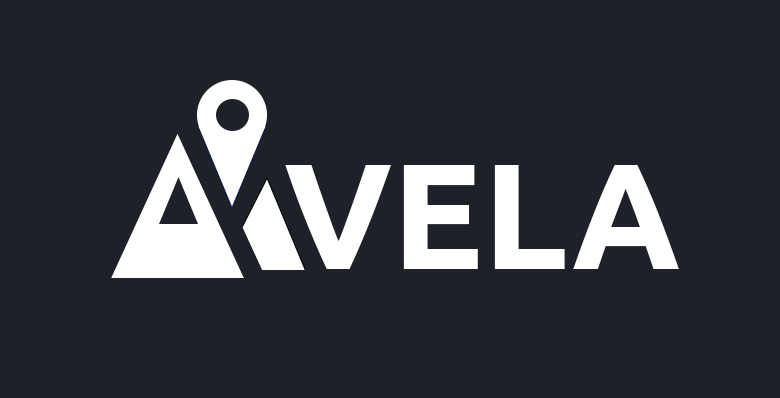
<style>
.page{position:relative;width:780px;height:398px;background:#1e2128}
.page>*{position:absolute;margin:0}
.t1{font:150px "Ubuntu-Bold";color:#ffffff}
</style>
<div class="page">
<p class="t1" style="left:285px;top:165px;width:394px;height:104px">VELA</p>
</div>
